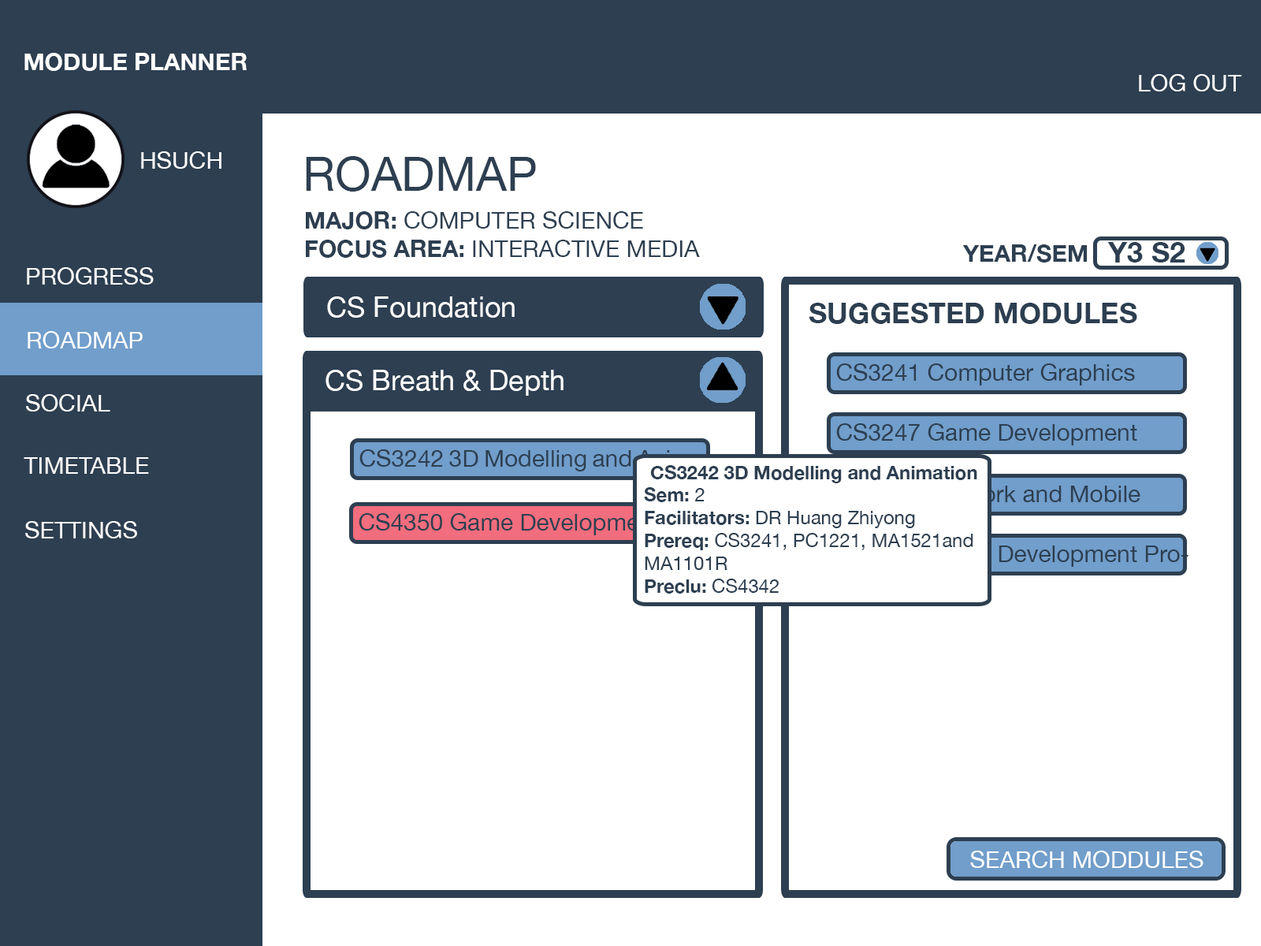
<style>
.page{position:relative;width:1261px;height:946px;background:#ffffff}
.page>*{position:absolute;margin:0}
.t1{font:23.6px "HelveticaNeue-Bold";color:#ffffff}
.t2{font:23.5px "HelveticaNeue";color:#ffffff}
.t3{font:47.3px "HelveticaNeue";color:#2d3f51}
.t4{font:23.6px "HelveticaNeue";color:#2d3f51}
.t5{font:23.6px "HelveticaNeue-Bold";color:#2d3f51}
.t6{font:28.4px "HelveticaNeue-Bold";color:#2d3f51}
.t7{font:23.6px "HelveticaNeue";color:#ffffff}
.t8{font:28.4px "HelveticaNeue";color:#ffffff}
.t9{font:28.6px "HelveticaNeue-Bold";color:#2d3f51}
.t10{font:18.9px "HelveticaNeue-Bold";color:#2d3f51}
.t11{font:18.9px "HelveticaNeue";color:#2d3f51}
.t12{font:23.6px "HelveticaNeue"}
</style>
<div class="page">
<p class="t1" style="left:24px;top:53px;width:223px;height:18px">MODULE PLANNER</p>
<p class="t2" style="left:1139px;top:74px;width:103px;height:17px">LOG OUT</p>
<p class="t2" style="left:141px;top:151px;width:80px;height:18px">HSUCH</p>
<p class="t3" style="left:306px;top:156px;width:230px;height:36px">ROADMAP</p>
<p class="t4" style="left:306px;top:211px;width:394px;height:47px;text-align:right"><span class="t5">MAJOR:</span> COMPUTER SCIENCE<br><span class="t5">FOCUS AREA: </span>INTERACTIVE MEDIA</p>
<p class="t5" style="left:962px;top:244px;width:126px;height:18px">YEAR/SEM</p>
<p class="t6" style="left:1107px;top:242px;width:78px;height:20px">Y3 S2</p>
<p class="t7" style="left:27px;top:267px;width:127px;height:17px">PROGRESS</p>
<p class="t8" style="left:327px;top:296px;width:188px;height:22px">CS Foundation</p>
<p class="t9" style="left:809px;top:303px;width:328px;height:21px">SUGGESTED MODULES</p>
<p class="t7" style="left:28px;top:331px;width:115px;height:17px">ROADMAP</p>
<p class="t4" style="left:836px;top:363px;width:299px;height:22px">CS3241 Computer Graphics</p>
<p class="t8" style="left:325px;top:370px;width:238px;height:26px">CS Breath &amp; Depth</p>
<p class="t7" style="left:26px;top:394px;width:84px;height:17px">SOCIAL</p>
<p class="t4" style="left:836px;top:423px;width:301px;height:22px">CS3247 Game Development</p>
<p class="t4" style="left:359px;top:449px;width:353px;height:22px">CS3242 3D Modelling and Animation</p>
<p class="t7" style="left:24px;top:457px;width:125px;height:17px">TIMETABLE</p>
<p class="t10" style="left:644px;top:465px;width:333px;height:128px;text-align:right">CS3242 3D Modelling and Animation<br>Sem:<span class="t11"> 2<br></span>Facilitators:<span class="t11"> DR Huang Zhiyong<br></span>Prereq:<span class="t11"> CS3241, PC1221, MA1521and MA1101R<br></span>Preclu: <span class="t11">CS4342</span></p>
<p class="t12" style="left:836px;top:485px;width:304px;height:17px">CS4344 Network and Mobile Gaming</p>
<p class="t7" style="left:25px;top:521px;width:112px;height:17px">SETTINGS</p>
<p class="t4" style="left:359px;top:513px;width:352px;height:22px">CS4350 Game Development Project</p>
<p class="t12" style="left:836px;top:545px;width:352px;height:22px">CS4350 Game Development Project</p>
<p class="t2" style="left:970px;top:850px;width:233px;height:18px">SEARCH MODDULES</p>
</div>
